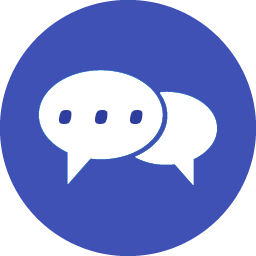
<style>
.page{position:relative;width:256px;height:256px;background:#3f51b5}
.page>*{position:absolute;margin:0}
.t1{font:144px "Calibri-LightItalic";color:#2d3e9f}
</style>
<div class="page">
<p class="t1" style="left:58px;top:110px;width:85px;height:14px">...</p>
</div>
